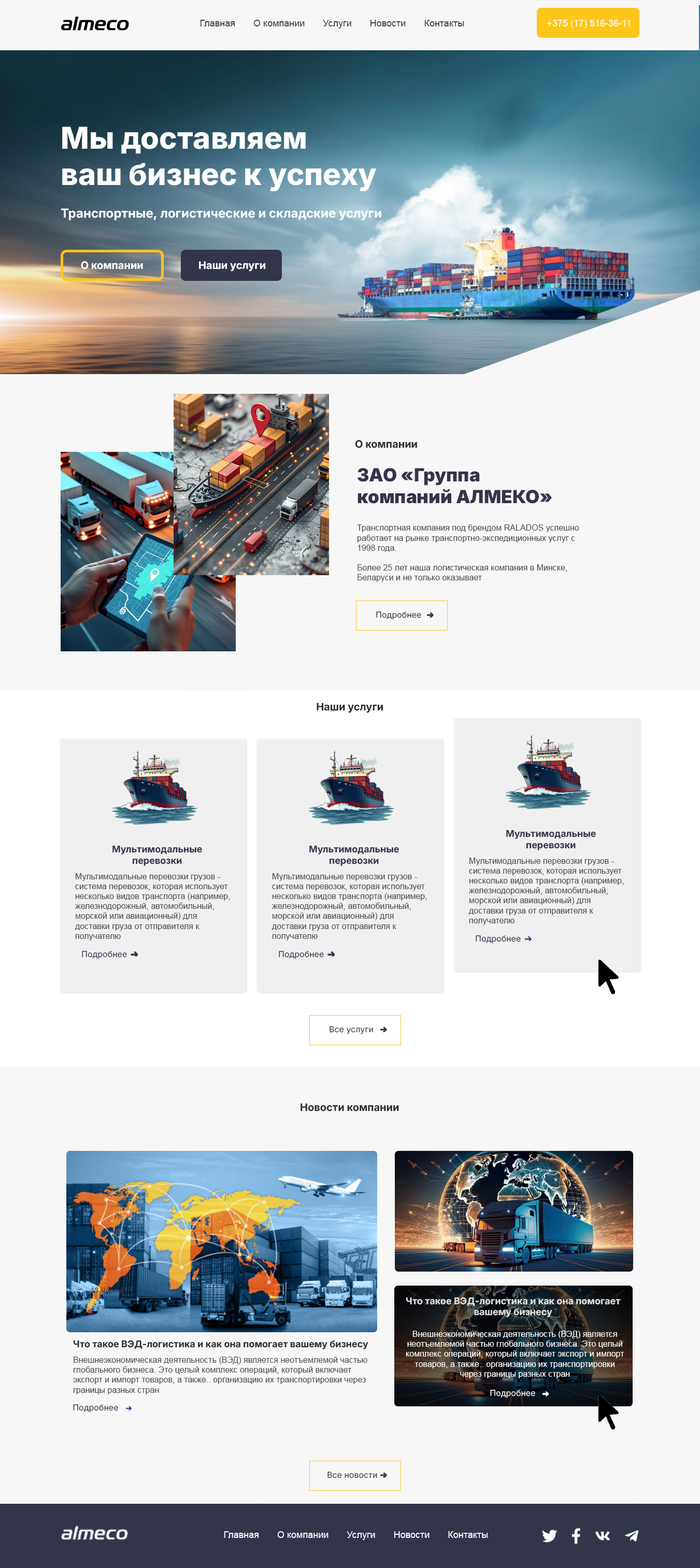
<style>
.page{position:relative;width:700px;height:1568px;background:#f7f7f7}
.page>*{position:absolute;margin:0}
.t1{font:9.3px "ArialMT";color:#404040}
.t2{font:9.3px "ArialMT";color:#ffffff}
.t3{font:30.1px "Inter-ExtraBold";color:#ffffff}
.t4{font:12.4px "Inter-Bold";color:#ffffff}
.t5{font:10.4px "Inter-Bold";color:#ffffff}
.t6{font:10.4px "Inter-Bold";color:#2a2c30}
.t7{font:18.1px "Inter-Black";color:#33354a}
.t8{font:8.3px "ArialMT";color:#47494c}
.t9{font:8.3px "Inter-Regular";color:#33354a}
.t10{font:9.3px "Inter-Bold";color:#33354a}
.t11{font:7.3px "Arial-ItalicMT";color:#33354a}
.t12{font:9.3px "Inter-Bold";color:#dddddd}
.t13{font:8.3px "ArialMT";color:#ffffff}
.t14{font:9.3px "Inter-Bold";color:#2a2c30}
.t15{font:8.3px "Inter-Regular";color:#f7f7f7}
</style>
<div class="page">
<p class="t1" style="left:200px;top:20px;width:264px;height:8px">Главная       О компании       Услуги       Новости       Контакты</p>
<p class="t2" style="left:547px;top:20px;width:83px;height:8px">+375 (17) 516-36-11</p>
<p class="t3" style="left:62px;top:126px;width:315px;height:65px">Мы доставляем<br>ваш бизнес к успеху</p>
<p class="t4" style="left:61px;top:208px;width:320px;height:13px">Транспортные, логистические и складские услуги</p>
<p class="t5" style="left:81px;top:261px;width:62px;height:8px">О компании</p>
<p class="t5" style="left:199px;top:261px;width:67px;height:11px">Наши услуги</p>
<p class="t6" style="left:355px;top:440px;width:62px;height:8px">О компании</p>
<p class="t7" style="left:358px;top:468px;width:194px;height:36px">ЗАО «Группа<br>компаний АЛМЕКО»</p>
<p class="t8" style="left:357px;top:524px;width:222px;height:58px">Транспортная компания под брендом RALADOS успешно работает на рынке транспортно-экспедиционных услуг с 1998 года.<br><br>Более 25 лет наша логистическая компания в Минске, Беларуси и не только оказывает транспортно-экспедиционные услуги.</p>
<p class="t9" style="left:376px;top:611px;width:45px;height:9px">Подробнее</p>
<p class="t6" style="left:317px;top:703px;width:66px;height:10px">Наши услуги</p>
<p class="t10" style="left:506px;top:830px;width:90px;height:20px;text-align:center">Мультимодальные<br>перевозки</p>
<p class="t10" style="left:112px;top:845px;width:90px;height:21px;text-align:center">Мультимодальные<br>перевозки</p>
<p class="t10" style="left:309px;top:845px;width:90px;height:21px;text-align:center">Мультимодальные<br>перевозки</p>
<p class="t8" style="left:468px;top:858px;width:156px;height:67px">Мультимодальные перевозки грузов - система перевозок, которая использует несколько видов транспорта (например, железнодорожный, автомобильный, морской или авиационный) для доставки груза от отправителя к получателю</p>
<p class="t8" style="left:75px;top:873px;width:155px;height:67px">Мультимодальные перевозки грузов - система перевозок, которая использует несколько видов транспорта (например, железнодорожный, автомобильный, морской или авиационный) для доставки груза от отправителя к получателю</p>
<p class="t8" style="left:272px;top:873px;width:155px;height:67px">Мультимодальные перевозки грузов - система перевозок, которая использует несколько видов транспорта (например, железнодорожный, автомобильный, морской или авиационный) для доставки груза от отправителя к получателю</p>
<p class="t9" style="left:476px;top:935px;width:45px;height:9px">Подробнее</p>
<p class="t9" style="left:82px;top:951px;width:45px;height:8px">Подробнее</p>
<p class="t9" style="left:279px;top:951px;width:45px;height:8px">Подробнее</p>
<p class="t9" style="left:330px;top:1026px;width:43px;height:8px">Все услуги</p>
<p class="t6" style="left:301px;top:1103px;width:98px;height:8px">Новости компании</p>
<p class="t11" style="left:91px;top:1288px;width:32px;height:6px">13 марта</p>
<p class="t12" style="left:406px;top:1297px;width:215px;height:20px;text-align:center">Что такое ВЭД-логистика и как она помогает вашему бизнесу</p>
<p class="t13" style="left:406px;top:1331px;width:218px;height:47px;text-align:center">Внешнеэкономическая деятельность (ВЭД) является неотъемлемой частью глобального бизнеса. Это целый комплекс операций, который включает экспорт и импорт товаров, а также.. организацию их транспортировки через границы разных стран</p>
<p class="t14" style="left:73px;top:1340px;width:295px;height:9px">Что такое ВЭД-логистика и как она помогает вашему бизнесу</p>
<p class="t8" style="left:73px;top:1357px;width:294px;height:37px">Внешнеэкономическая деятельность (ВЭД) является неотъемлемой частью глобального бизнеса. Это целый комплекс операций, который включает экспорт и импорт товаров, а также.. организацию их транспортировки через границы разных стран</p>
<p class="t15" style="left:490px;top:1390px;width:45px;height:8px">Подробнее</p>
<p class="t9" style="left:73px;top:1404px;width:45px;height:9px">Подробнее</p>
<p class="t9" style="left:327px;top:1472px;width:50px;height:6px">Все новости</p>
<p class="t2" style="left:224px;top:1531px;width:264px;height:9px">Главная       О компании       Услуги       Новости       Контакты</p>
</div>
